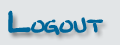
<style>
.page{position:relative;width:120px;height:45px;background:#e2e5e7}
.page>*{position:absolute;margin:0}
.t1{font:18px "BobbiesHand";color:#006699}
.t2{font:30px "BobbiesHand";color:#006699}
</style>
<div class="page">
<p class="t1" style="left:9px;top:11px;width:94px;height:23px"><span class="t2">L</span>OGOUT</p>
</div>
